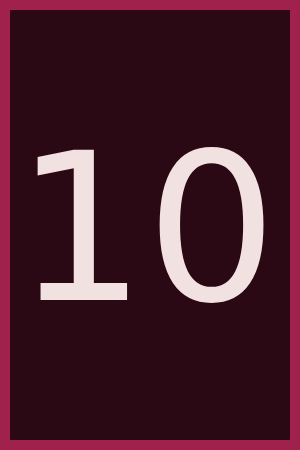
<style>
.page{position:relative;width:300px;height:450px;background:#2a0914}
.page>*{position:absolute;margin:0}
.t1{font:206px "DejaVuSans";color:#f2e1e1}
</style>
<div class="page">
<p class="t1" style="left:37px;top:147px;width:227px;height:156px">10</p>
</div>
